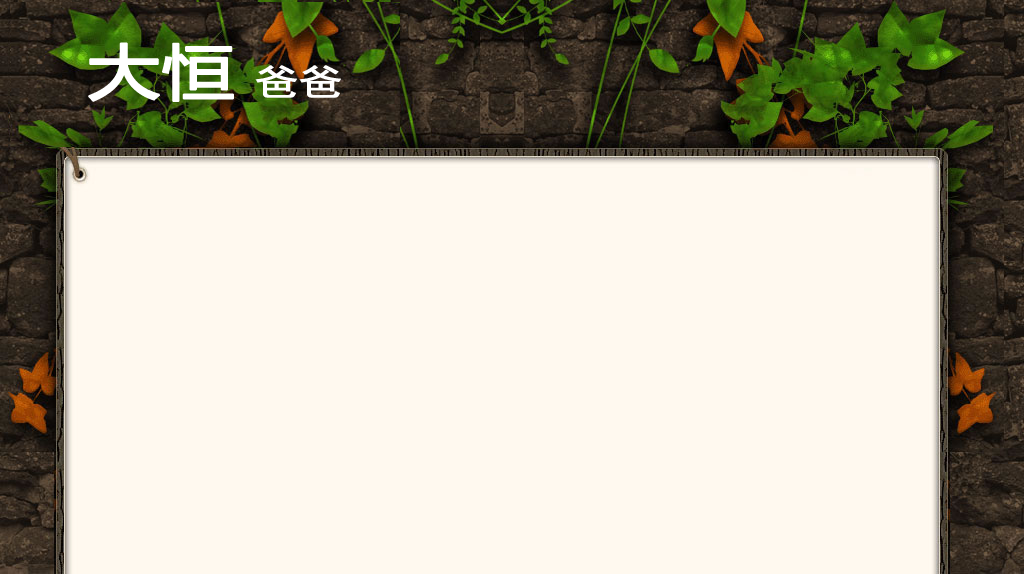
<style>
.page{position:relative;width:1024px;height:574px;background:#fff9ef}
.page>*{position:absolute;margin:0}
.t1{font:60px "MicrosoftYaHei";color:#ffffff;font-weight:bold;scale:1.2 1}
.t2{font:36px "SimHei";color:#ffffff;font-weight:bold;scale:1.2 1}
</style>
<div class="page">
<p class="t1" style="left:88px;top:42px;width:146px;height:60px">大恒</p>
<p class="t2" style="left:255px;top:65px;width:86px;height:33px">爸爸</p>
</div>
